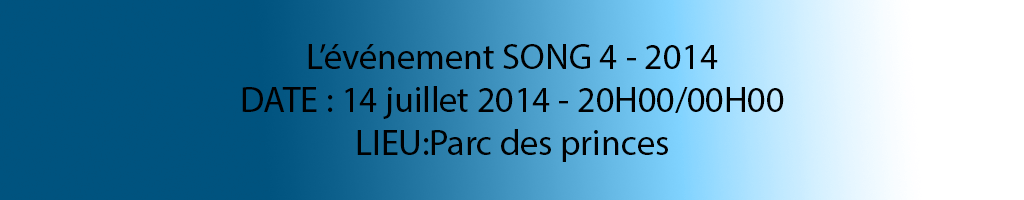
<style>
.page{position:relative;width:1024px;height:200px;background:#00537f}
.page>*{position:absolute;margin:0}
.t1{font:36px "MyriadPro-Regular";color:#000000}
</style>
<div class="page">
<p class="t1" style="left:242px;top:44px;width:542px;height:118px;text-align:center">L’événement SONG 4 - 2014<br>DATE : 14 juillet 2014 - 20H00/00H00<br>LIEU:Parc des princes</p>
</div>
